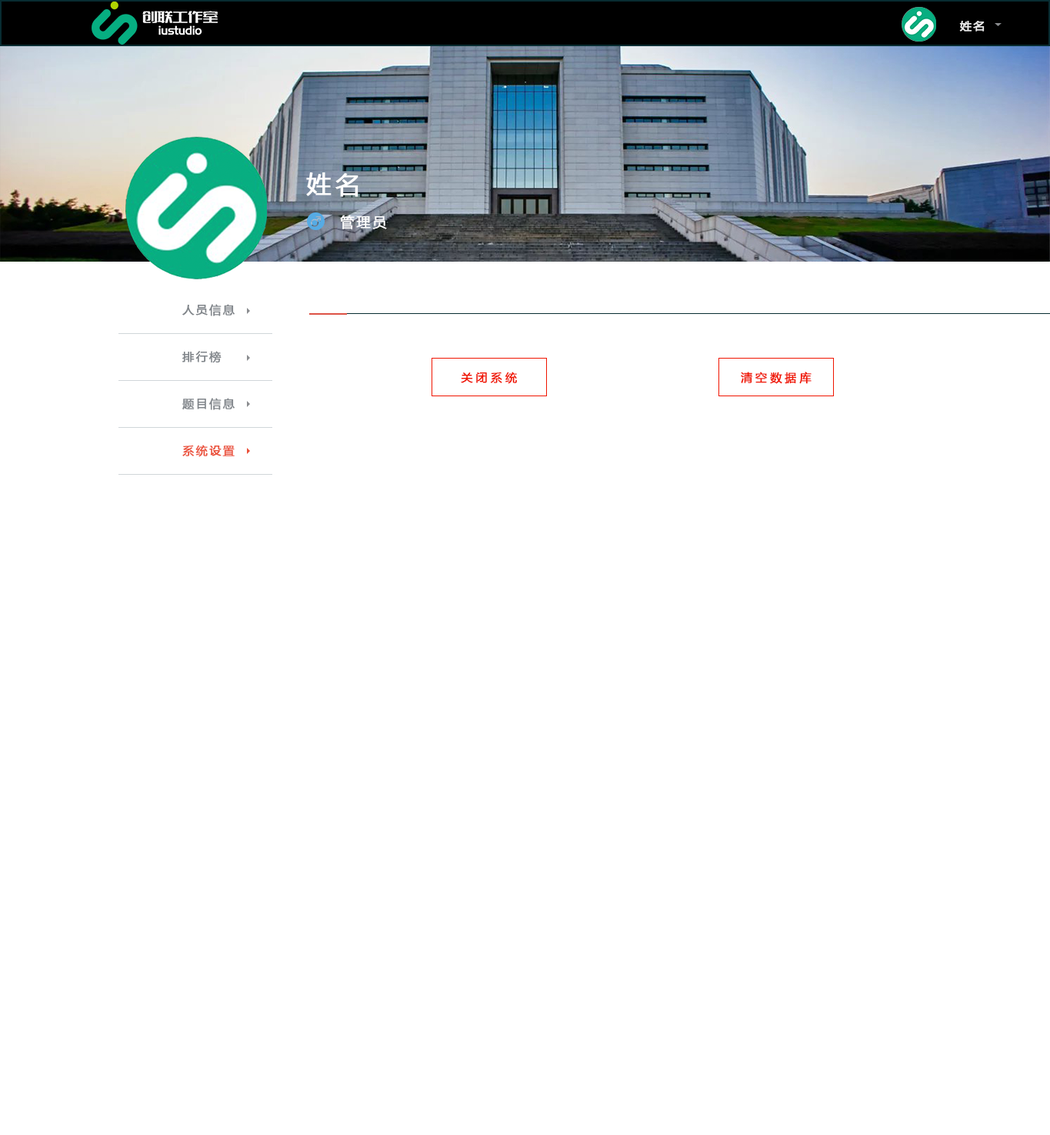
<style>
.page{position:relative;width:1050px;height:1135px;background:#ffffff}
.page>*{position:absolute;margin:0}
.t1{font:11.5px "MicrosoftYaHei";letter-spacing:0.14em;color:#eaeaea;font-weight:bold}
.t2{font:24.6px "MicrosoftYaHei";letter-spacing:0.14em;color:#ffffff;font-weight:bold}
.t3{font:13.9px "MicrosoftYaHei";letter-spacing:0.14em;color:#ffffff;font-weight:bold}
.t4{font:11.5px/47px "MicrosoftYaHei";letter-spacing:0.14em;color:#7f8489;font-weight:bold}
.t5{font:11.5px/47px "MicrosoftYaHei";letter-spacing:0.14em;color:#eb4f38;font-weight:bold}
.t6{font:11.5px "MicrosoftYaHei";letter-spacing:0.25em;color:#f01400;font-weight:bold}
</style>
<div class="page">
<p class="t1" style="left:960px;top:21px;width:25px;height:11px">姓名</p>
<p class="t2" style="left:306px;top:172px;width:53px;height:25px">姓名</p>
<p class="t3" style="left:340px;top:215px;width:47px;height:14px">管理员</p>
<p class="t4" style="left:182px;top:304px;width:53px;height:153px">人员信息<br>排行榜<br>题目信息<br><span class="t5">系统设置<br></span>a</p>
<p class="t6" style="left:461px;top:372px;width:56px;height:12px">关闭系统</p>
<p class="t6" style="left:741px;top:372px;width:71px;height:12px">清空数据库</p>
</div>
